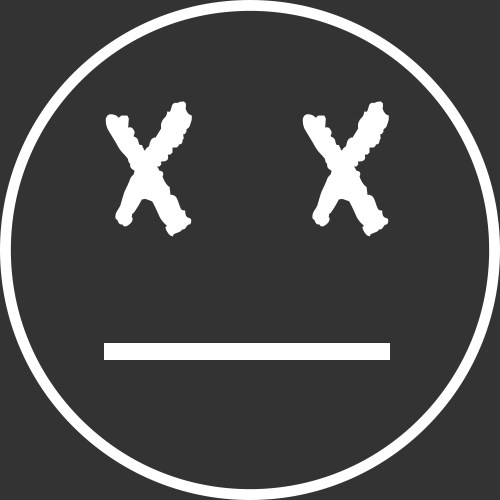
<style>
.page{position:relative;width:500px;height:500px;background:#333333}
.page>*{position:absolute;margin:0}
.t1{font:150px "Chalkduster";letter-spacing:0.2em;color:#ffffff;font-weight:bold}
</style>
<div class="page">
<p class="t1" style="left:105px;top:101px;width:284px;height:136px">X X</p>
</div>
